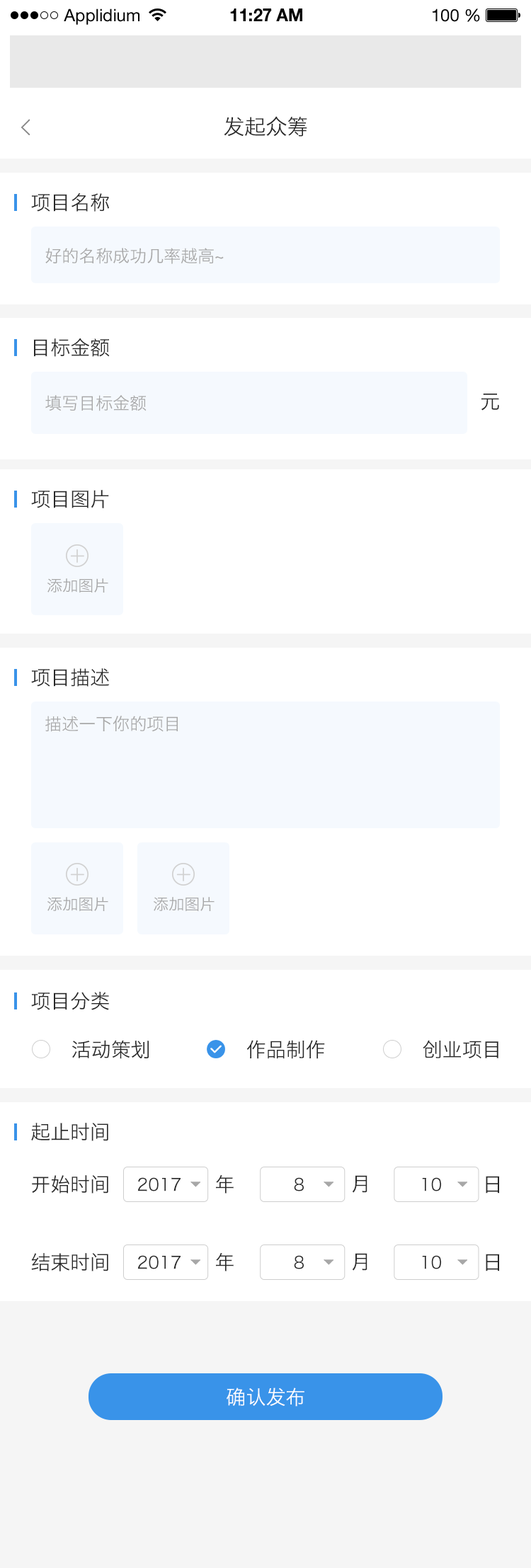
<style>
.page{position:relative;width:531px;height:1568px;background:#ffffff}
.page>*{position:absolute;margin:0}
.t1{font:17px "HelveticaNeueLTStd-Roman";color:#000000}
.t2{font:17px "HelveticaNeueLTStd-Bd";color:#000000}
.t3{font:21.2px "HiraginoSansGB-W3";color:#282828}
.t4{font:19.8px "HiraginoSansGB-W3";color:#282828}
.t5{font:17px "HiraginoSansGB-W3";color:#a7a7a7}
.t6{font:15.6px "HiraginoSansGB-W3";color:#a7a7a7}
.t7{font:19.8px "HiraginoSansGB-W3";color:#282828;text-transform:uppercase}
.t8{font:17px "HiraginoSansGB-W3";color:#282828}
.t9{font:19.8px "HiraginoSansGB-W3";color:#ffffff}
</style>
<div class="page">
<p class="t1" style="left:64px;top:8px;width:75px;height:17px">Applidium</p>
<p class="t2" style="left:230px;top:8px;width:72px;height:13px">11:27 AM</p>
<p class="t1" style="left:433px;top:8px;width:47px;height:14px">100 %</p>
<p class="t3" style="left:224px;top:116px;width:83px;height:21px">发起众筹</p>
<p class="t4" style="left:31px;top:193px;width:78px;height:19px">项目名称</p>
<p class="t5" style="left:45px;top:248px;width:179px;height:16px">好的名称成功几率越高~</p>
<p class="t4" style="left:33px;top:338px;width:77px;height:19px">目标金额</p>
<p class="t5" style="left:45px;top:395px;width:102px;height:16px">填写目标金额</p>
<p class="t4" style="left:481px;top:393px;width:18px;height:18px">元</p>
<p class="t4" style="left:31px;top:490px;width:78px;height:18px">项目图片</p>
<p class="t6" style="left:47px;top:578px;width:61px;height:15px">添加图片</p>
<p class="t4" style="left:31px;top:668px;width:79px;height:19px">项目描述</p>
<p class="t5" style="left:45px;top:716px;width:133px;height:16px">描述一下你的项目</p>
<p class="t6" style="left:47px;top:897px;width:61px;height:15px">添加图片</p>
<p class="t6" style="left:154px;top:897px;width:60px;height:15px">添加图片</p>
<p class="t4" style="left:31px;top:992px;width:78px;height:18px">项目分类</p>
<p class="t7" style="left:72px;top:1040px;width:77px;height:19px">活动策划</p>
<p class="t7" style="left:246px;top:1040px;width:79px;height:19px">作品制作</p>
<p class="t7" style="left:423px;top:1040px;width:75px;height:19px">创业项目</p>
<p class="t4" style="left:31px;top:1123px;width:77px;height:18px">起止时间</p>
<p class="t4" style="left:32px;top:1175px;width:76px;height:19px">开始时间</p>
<p class="t8" style="left:137px;top:1177px;width:44px;height:14px">2017</p>
<p class="t4" style="left:216px;top:1175px;width:18px;height:19px">年</p>
<p class="t8" style="left:294px;top:1177px;width:10px;height:14px">8</p>
<p class="t4" style="left:352px;top:1175px;width:15px;height:18px">月</p>
<p class="t8" style="left:422px;top:1177px;width:19px;height:14px">10</p>
<p class="t4" style="left:486px;top:1176px;width:14px;height:18px">日</p>
<p class="t4" style="left:31px;top:1253px;width:77px;height:18px">结束时间</p>
<p class="t4" style="left:216px;top:1253px;width:18px;height:18px">年</p>
<p class="t4" style="left:352px;top:1253px;width:15px;height:18px">月</p>
<p class="t4" style="left:486px;top:1254px;width:14px;height:17px">日</p>
<p class="t8" style="left:137px;top:1255px;width:44px;height:14px">2017</p>
<p class="t8" style="left:294px;top:1255px;width:10px;height:14px">8</p>
<p class="t8" style="left:422px;top:1255px;width:19px;height:14px">10</p>
<p class="t9" style="left:227px;top:1387px;width:77px;height:20px">确认发布</p>
</div>
